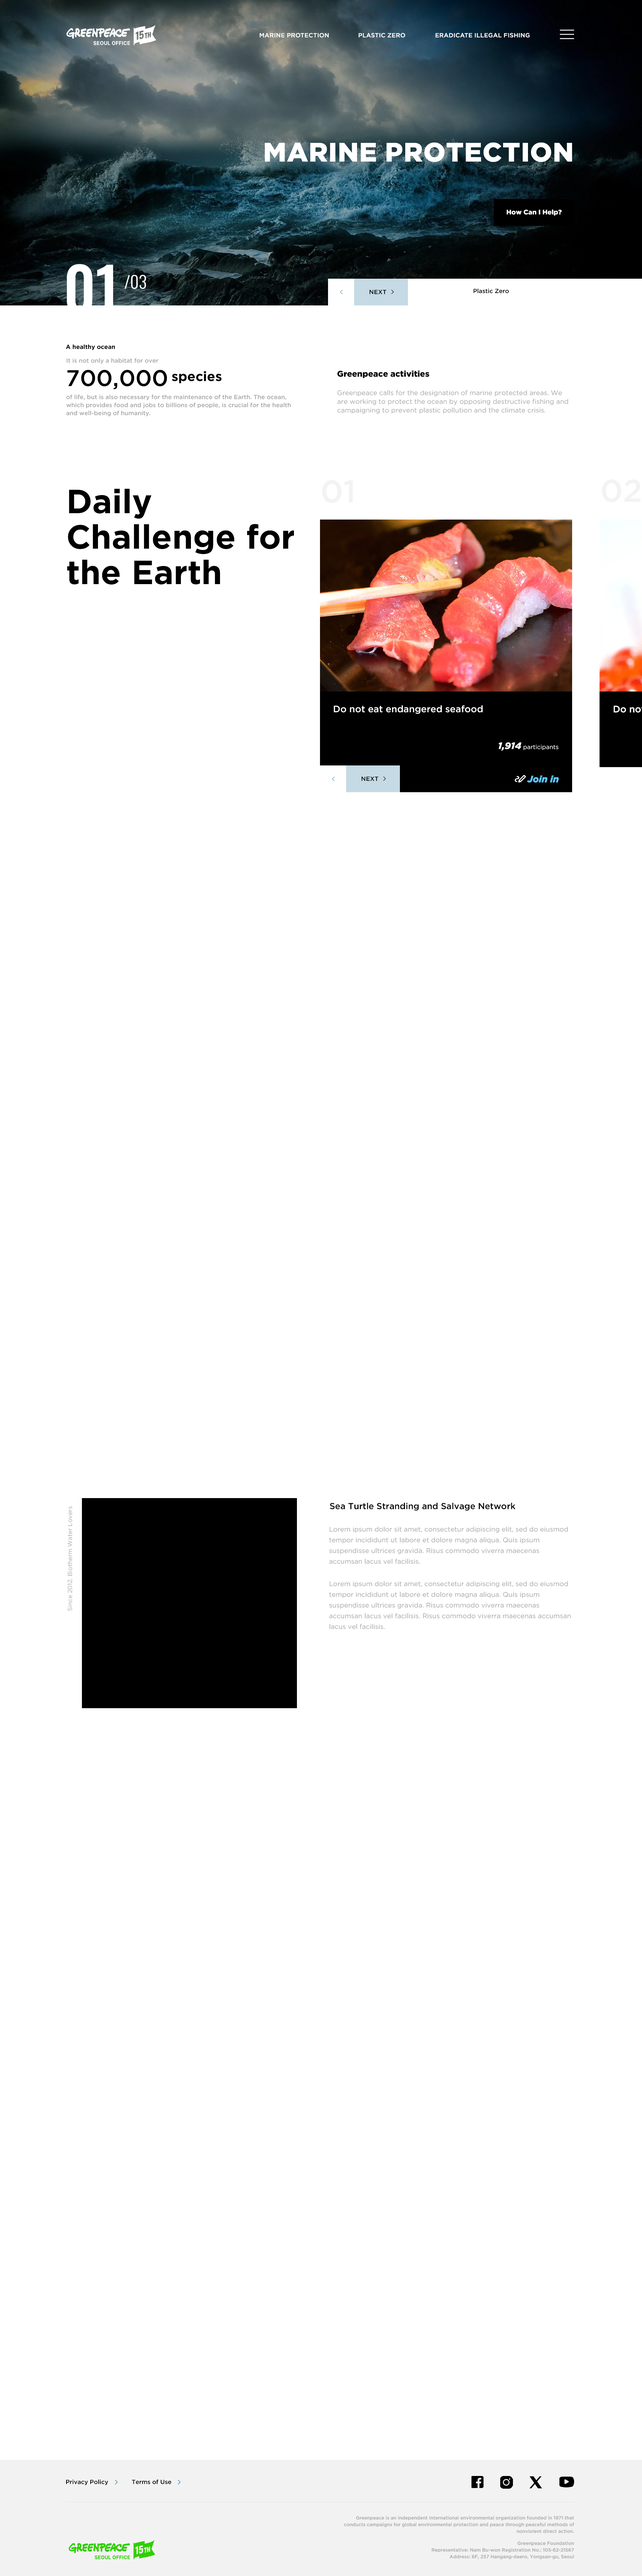
<style>
.page{position:relative;width:642px;height:2576px;background:#ffffff}
.page>*{position:absolute;margin:0}
.t1{font:6px "GothamPro-Medium";color:#ffffff;text-transform:uppercase}
.t2{font:26.8px "GothamPro-Black";color:#ffffff;text-transform:uppercase}
.t3{font:6.7px "GothamPro-Black";color:#ffffff}
.t4{font:6.7px "GothamPro-Black";color:#ffffff;text-transform:uppercase}
.t5{font:60.2px "Oswald-Medium";color:#ffffff;text-transform:uppercase}
.t6{font:16.7px "Oswald-Light";color:#ffffff;text-transform:uppercase}
.t7{font:6px "GothamPro-Medium";color:#000000;text-transform:uppercase}
.t8{font:6px "GothamPro-Medium";color:#000000}
.t9{font:6px "GothamPro-Bold";color:#000000}
.t10{font:6px "GothamPro-Medium";color:#a6a6a6}
.t11{font:22.7px "GothamPro-Medium";color:#000000}
.t12{font:13.4px "GothamPro-Bold";color:#000000}
.t13{font:8.4px "GothamPro-Black";color:#000000}
.t14{font:6px/8px "GothamPro-Medium";color:#a6a6a6}
.t15{font:6.7px/8.7px "GothamPro";color:#a6a6a6}
.t16{font:31.4px "GothamPro-Medium";color:#f3f3f3}
.t17{font:33.5px/35.5px "GothamPro-Bold";color:#000000}
.t18{font:9.4px "GothamPro-Medium";color:#ffffff}
.t19{font:9.4px "GothamPro-BlackItalic";color:#ffffff}
.t20{font:6px "GothamPro";color:#ffffff}
.t21{font:9.4px "GothamPro-BlackItalic";color:#5cc7ff}
.t22{font:8.7px "GothamPro-Medium";color:#000000}
.t23{font:6px "GothamPro";color:#acacac}
.t24{font:6.7px/10.7px "GothamPro";color:#a6a6a6}
.t25{font:4.7px/6.7px "GothamPro-Medium";color:#a6a6a6}
</style>
<div class="page">
<p class="t1" style="left:260px;top:33px;width:69px;height:4px">Marine protection</p>
<p class="t1" style="left:359px;top:33px;width:46px;height:4px">Plastic Zero</p>
<p class="t1" style="left:436px;top:33px;width:94px;height:4px">Eradicate illegal fishing</p>
<p class="t2" style="left:265px;top:143px;width:307px;height:19px">Marine protection</p>
<p class="t3" style="left:507px;top:209px;width:55px;height:7px"><span class="t4">h</span>ow Can I Help?</p>
<p class="t5" style="left:67px;top:264px;width:46px;height:50px">01</p>
<p class="t6" style="left:125px;top:275px;width:21px;height:14px">/03</p>
<p class="t7" style="left:370px;top:290px;width:17px;height:4px">next</p>
<p class="t8" style="left:474px;top:288px;width:35px;height:5px">Plastic Zero</p>
<p class="t9" style="left:66px;top:344px;width:49px;height:6px">A healthy ocean</p>
<p class="t10" style="left:67px;top:358px;width:92px;height:6px">It is not only a habitat for over</p>
<p class="t11" style="left:67px;top:370px;width:100px;height:19px">700,000</p>
<p class="t12" style="left:172px;top:371px;width:50px;height:12px">species</p>
<p class="t13" style="left:338px;top:370px;width:92px;height:8px">Greenpeace activities</p>
<p class="t14" style="left:66px;top:394px;width:225px;height:22px">of life, but is also necessary for the maintenance of the Earth. The ocean, which provides food and jobs to billions of people, is crucial for the health and well-being of humanity.</p>
<p class="t15" style="left:338px;top:390px;width:230px;height:24px">Greenpeace calls for the designation of marine protected areas. We are working to protect the ocean by opposing destructive fishing and campaigning to prevent plastic pollution and the climate crisis.</p>
<p class="t16" style="left:322px;top:480px;width:31px;height:23px">01</p>
<p class="t16" style="left:602px;top:479px;width:39px;height:23px">02</p>
<p class="t17" style="left:67px;top:489px;width:227px;height:96px">Daily Challenge for the Earth</p>
<p class="t18" style="left:334px;top:705px;width:149px;height:9px">Do not eat endangered seafood</p>
<p class="t19" style="left:499px;top:742px;width:23px;height:9px">1,914</p>
<p class="t20" style="left:524px;top:745px;width:35px;height:5px">participants</p>
<p class="t7" style="left:362px;top:776px;width:17px;height:5px">next</p>
<p class="t21" style="left:527px;top:775px;width:32px;height:8px">Join in</p>
<p class="t22" style="left:330px;top:1503px;width:186px;height:8px">Sea Turtle Stranding and Salvage Network</p>
<p class="t23" style="left:67px;top:1506px;width:5px;height:105px;rotate:-90deg">Since 2012. Biotherm Water Lovers</p>
<p class="t24" style="left:329px;top:1527px;width:239px;height:37px">Lorem ipsum dolor sit amet, consectetur adipiscing elit, sed do eiusmod tempor incididunt ut labore et dolore magna aliqua. Quis ipsum suspendisse ultrices gravida. Risus commodo viverra maecenas accumsan lacus vel facilisis.</p>
<p class="t24" style="left:329px;top:1581px;width:242px;height:48px">Lorem ipsum dolor sit amet, consectetur adipiscing elit, sed do eiusmod tempor incididunt ut labore et dolore magna aliqua. Quis ipsum suspendisse ultrices gravida. Risus commodo viverra maecenas accumsan lacus vel facilisis. Risus commodo viverra maecenas accumsan lacus vel facilisis.</p>
<p class="t8" style="left:66px;top:2479px;width:42px;height:6px">Privacy Policy</p>
<p class="t8" style="left:132px;top:2479px;width:39px;height:5px">Terms of Use</p>
<p class="t25" style="left:344px;top:2516px;width:230px;height:17px;text-align:right">Greenpeace is an independent international environmental organization founded in 1971 that conducts campaigns for global environmental protection and peace through peaceful methods of nonviolent direct action.</p>
<p class="t25" style="left:432px;top:2541px;width:142px;height:18px;text-align:right">Greenpeace Foundation<br>Representative: Nam Bu-won Registration No.: 105-82-21567<br>Address: 6F, 257 Hangang-daero, Yongsan-gu, Seoul</p>
</div>
